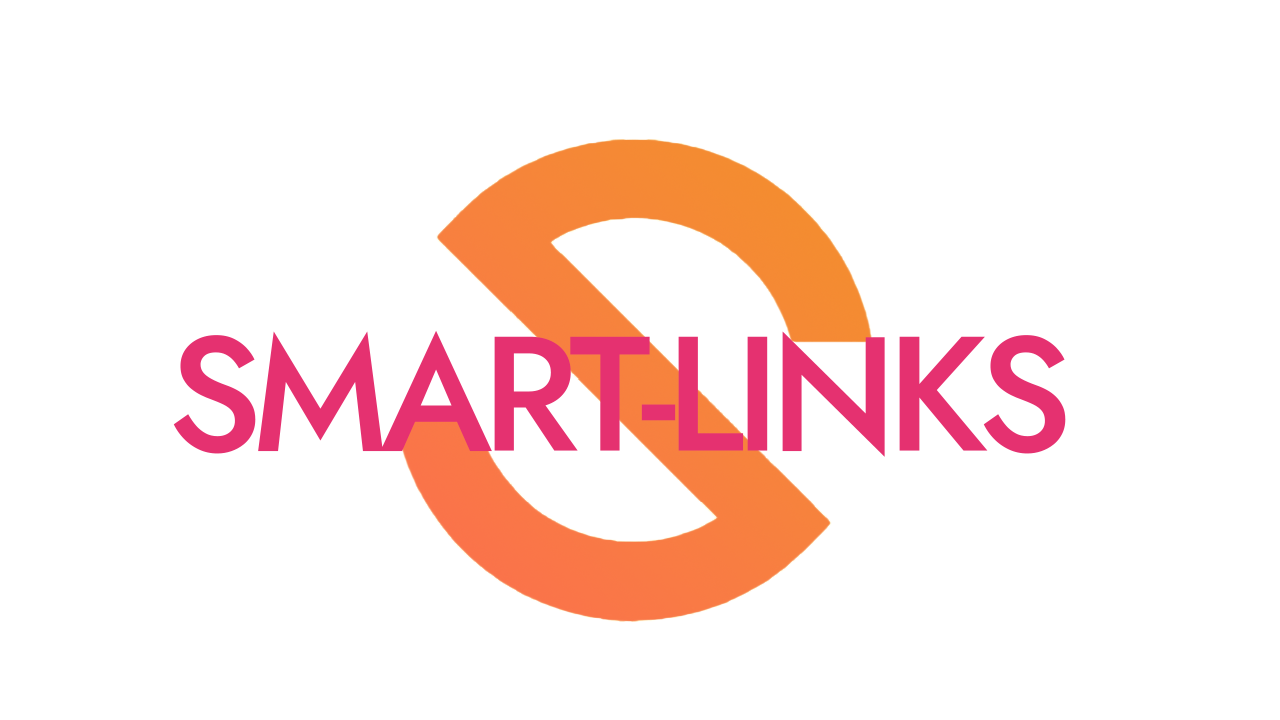
<style>
.page{position:relative;width:1280px;height:720px;background:#ffffff}
.page>*{position:absolute;margin:0}
.t1{font:162.5px "Jost-Medium";letter-spacing:-0.06em;color:#e53170}
</style>
<div class="page">
<p class="t1" style="left:173px;top:330px;width:893px;height:127px">SMART-LINKS</p>
</div>
